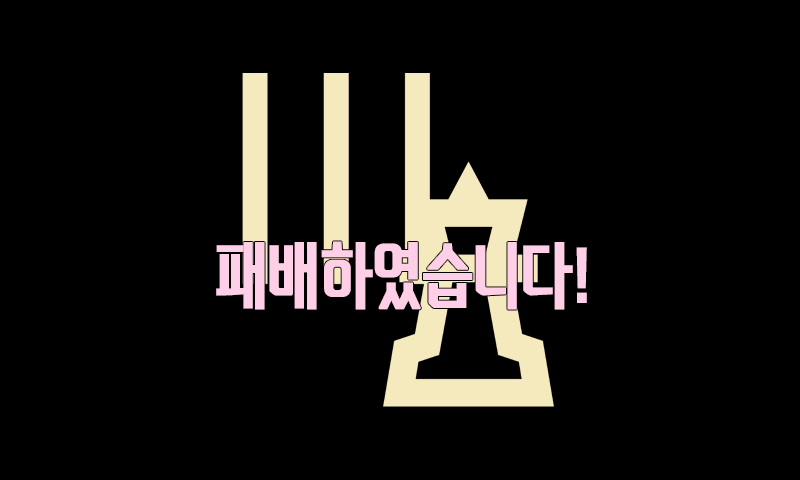
<style>
.page{position:relative;width:800px;height:480px;background:#000000}
.page>*{position:absolute;margin:0}
.t1{font:75.8px "Koverwatch";color:#ffcfe8;font-weight:bold}
</style>
<div class="page">
<p class="t1" style="left:216px;top:241px;width:371px;height:69px">패배하였습니다!</p>
</div>
